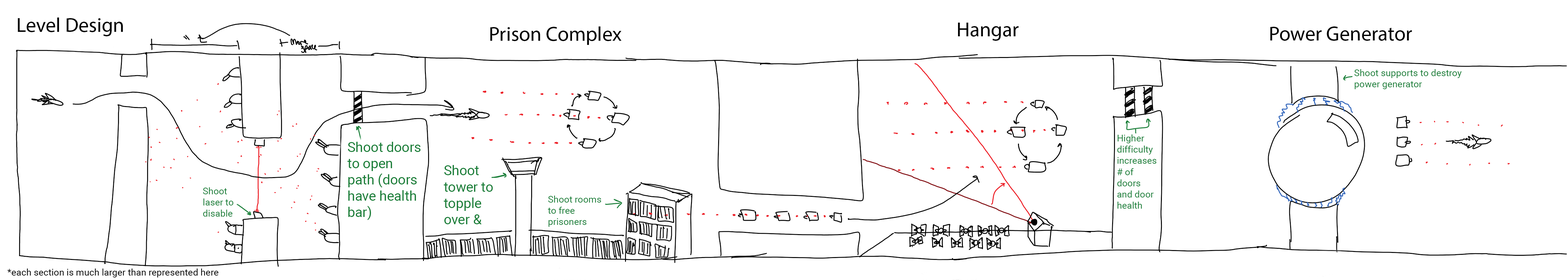
<style>
.page{position:relative;width:1568px;height:280px;background:#ffffff}
.page>*{position:absolute;margin:0}
.t1{font:20.4px "MyriadPro-Regular";color:#000000}
.t2{font:9.4px "Roboto-Regular";color:#177d36}
.t3{font:13.6px "Roboto-Regular";color:#177d36}
.t4{font:9.4px "Roboto-Regular";color:#000000}
</style>
<div class="page">
<p class="t1" style="left:18px;top:18px;width:105px;height:18px">Level Design</p>
<p class="t1" style="left:490px;top:26px;width:131px;height:19px">Prison Complex</p>
<p class="t1" style="left:958px;top:23px;width:61px;height:18px">Hangar</p>
<p class="t1" style="left:1270px;top:26px;width:142px;height:15px">Power Generator</p>
<p class="t2" style="left:1354px;top:69px;width:108px;height:20px">Shoot supports to destroy power generator</p>
<p class="t2" style="left:1117px;top:135px;width:39px;height:74px">Higher difficulty increases # of doors and door health</p>
<p class="t3" style="left:347px;top:142px;width:73px;height:78px">Shoot doors to open path (doors have health bar)</p>
<p class="t3" style="left:444px;top:165px;width:49px;height:60px">Shoot tower to topple  over &amp; free  prisoners below</p>
<p class="t2" style="left:203px;top:188px;width:31px;height:29px">Shoot laser to disable</p>
<p class="t2" style="left:548px;top:196px;width:53px;height:31px">Shoot rooms to free prisoners</p>
<p class="t4" style="left:7px;top:269px;width:212px;height:9px">*each section is much larger than represented here</p>
</div>
